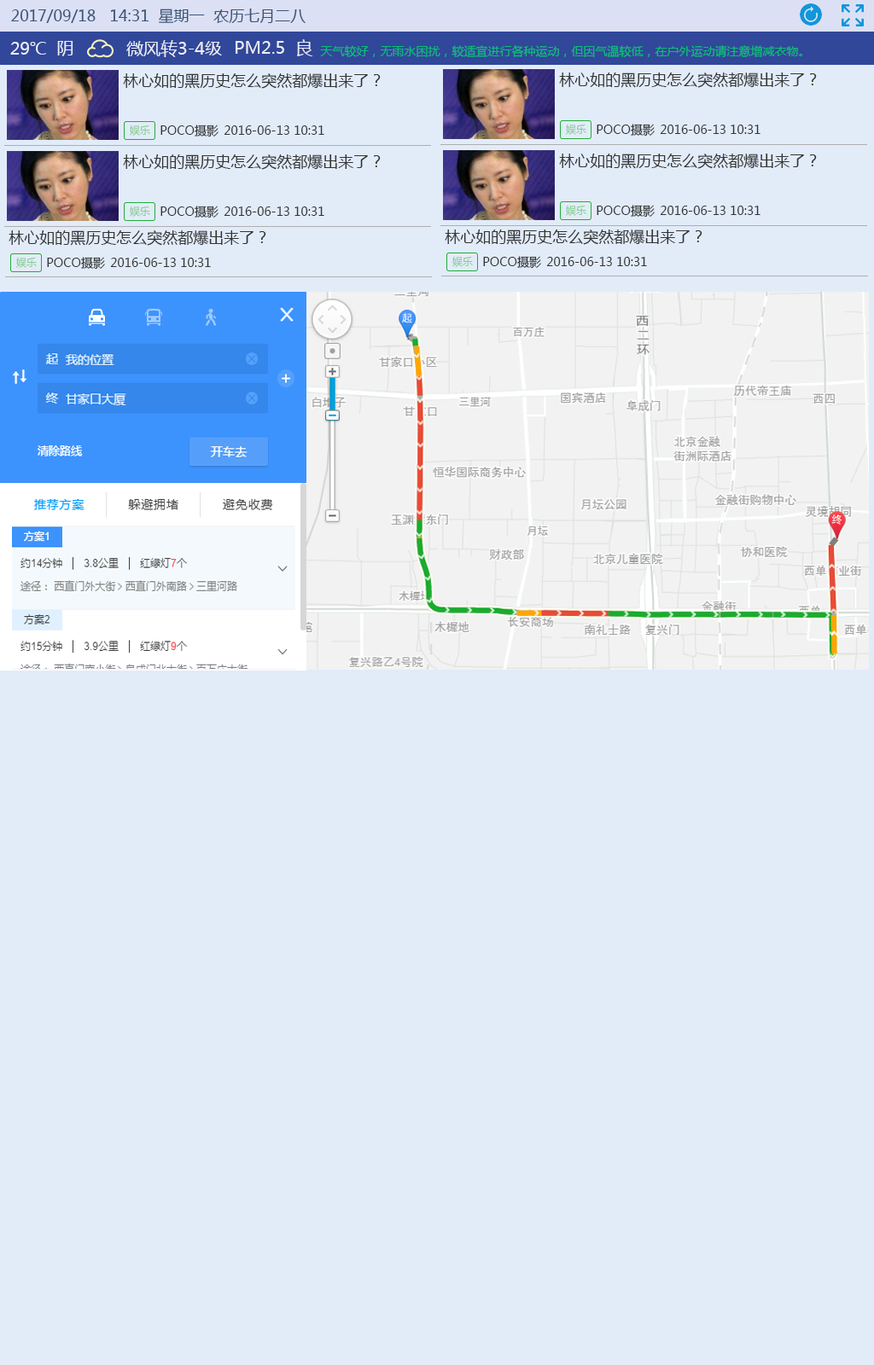
<style>
.page{position:relative;width:874px;height:1365px;background:#e2ecf9}
.page>*{position:absolute;margin:0}
.t1{font:15.4px "MicrosoftYaHei";color:#3a5576}
.t2{font:17.1px "MicrosoftYaHei";color:#eaedf5}
.t3{font:11.9px "MicrosoftYaHei";color:#08c074}
.t4{font:17.1px "MicrosoftYaHei";color:#08c074}
.t5{font:15.4px "MicrosoftYaHei";color:#333333}
.t6{font:10.2px "MicrosoftYaHei";color:#88cd93}
.t7{font:11.9px "MicrosoftYaHei";color:#333333}
</style>
<div class="page">
<p class="t1" style="left:11px;top:9px;width:294px;height:14px">2017/09/18   14:31  星期一  农历七月二八</p>
<p class="t2" style="left:10px;top:42px;width:36px;height:13px">29℃</p>
<p class="t2" style="left:57px;top:41px;width:16px;height:15px">阴</p>
<p class="t2" style="left:126px;top:40px;width:96px;height:17px">微风转3-4级</p>
<p class="t2" style="left:235px;top:39px;width:78px;height:17px">PM2.5  良</p>
<p class="t3" style="left:320px;top:45px;width:482px;height:12px"><span class="t4">  </span>天气较好，无雨水困扰，较适宜进行各种运动，但因气温较低，在户外运动请注意增减衣物。</p>
<p class="t5" style="left:123px;top:73px;width:257px;height:16px">林心如的黑历史怎么突然都爆出来了？</p>
<p class="t5" style="left:559px;top:73px;width:257px;height:15px">林心如的黑历史怎么突然都爆出来了？</p>
<p class="t6" style="left:130px;top:125px;width:20px;height:11px">娱乐</p>
<p class="t7" style="left:160px;top:125px;width:58px;height:12px">POCO摄影</p>
<p class="t7" style="left:224px;top:125px;width:100px;height:10px">2016-06-13 10:31</p>
<p class="t6" style="left:566px;top:124px;width:20px;height:11px">娱乐</p>
<p class="t7" style="left:596px;top:124px;width:58px;height:12px">POCO摄影</p>
<p class="t7" style="left:659px;top:125px;width:101px;height:9px">2016-06-13 10:31</p>
<p class="t5" style="left:123px;top:154px;width:257px;height:16px">林心如的黑历史怎么突然都爆出来了？</p>
<p class="t5" style="left:559px;top:154px;width:257px;height:15px">林心如的黑历史怎么突然都爆出来了？</p>
<p class="t6" style="left:130px;top:206px;width:20px;height:11px">娱乐</p>
<p class="t7" style="left:160px;top:206px;width:58px;height:12px">POCO摄影</p>
<p class="t7" style="left:224px;top:206px;width:100px;height:10px">2016-06-13 10:31</p>
<p class="t6" style="left:566px;top:205px;width:20px;height:11px">娱乐</p>
<p class="t7" style="left:596px;top:205px;width:58px;height:13px">POCO摄影</p>
<p class="t7" style="left:659px;top:206px;width:101px;height:9px">2016-06-13 10:31</p>
<p class="t5" style="left:9px;top:230px;width:257px;height:16px">林心如的黑历史怎么突然都爆出来了？</p>
<p class="t5" style="left:444px;top:229px;width:258px;height:16px">林心如的黑历史怎么突然都爆出来了？</p>
<p class="t6" style="left:16px;top:257px;width:21px;height:11px">娱乐</p>
<p class="t7" style="left:47px;top:257px;width:58px;height:13px">POCO摄影</p>
<p class="t7" style="left:110px;top:258px;width:101px;height:9px">2016-06-13 10:31</p>
<p class="t6" style="left:452px;top:256px;width:21px;height:11px">娱乐</p>
<p class="t7" style="left:483px;top:256px;width:58px;height:13px">POCO摄影</p>
<p class="t7" style="left:546px;top:257px;width:101px;height:9px">2016-06-13 10:31</p>
</div>
